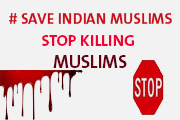
<style>
.page{position:relative;width:180px;height:120px;background:#f2f2f2}
.page>*{position:absolute;margin:0}
.t1{font:15px "TheSans-Bold";color:#c9111d}
.t2{font:16px "TheSans-Bold";color:#fc0033}
.t3{font:18px "TheSans-Bold";color:#660015}
</style>
<div class="page">
<p class="t1" style="left:9px;top:13px;width:163px;height:11px"># SAVE INDIAN MUSLIMS</p>
<p class="t2" style="left:42px;top:35px;width:92px;height:33px;text-align:center">STOP KILLING <br><span class="t3">MUSLIMS</span></p>
</div>
